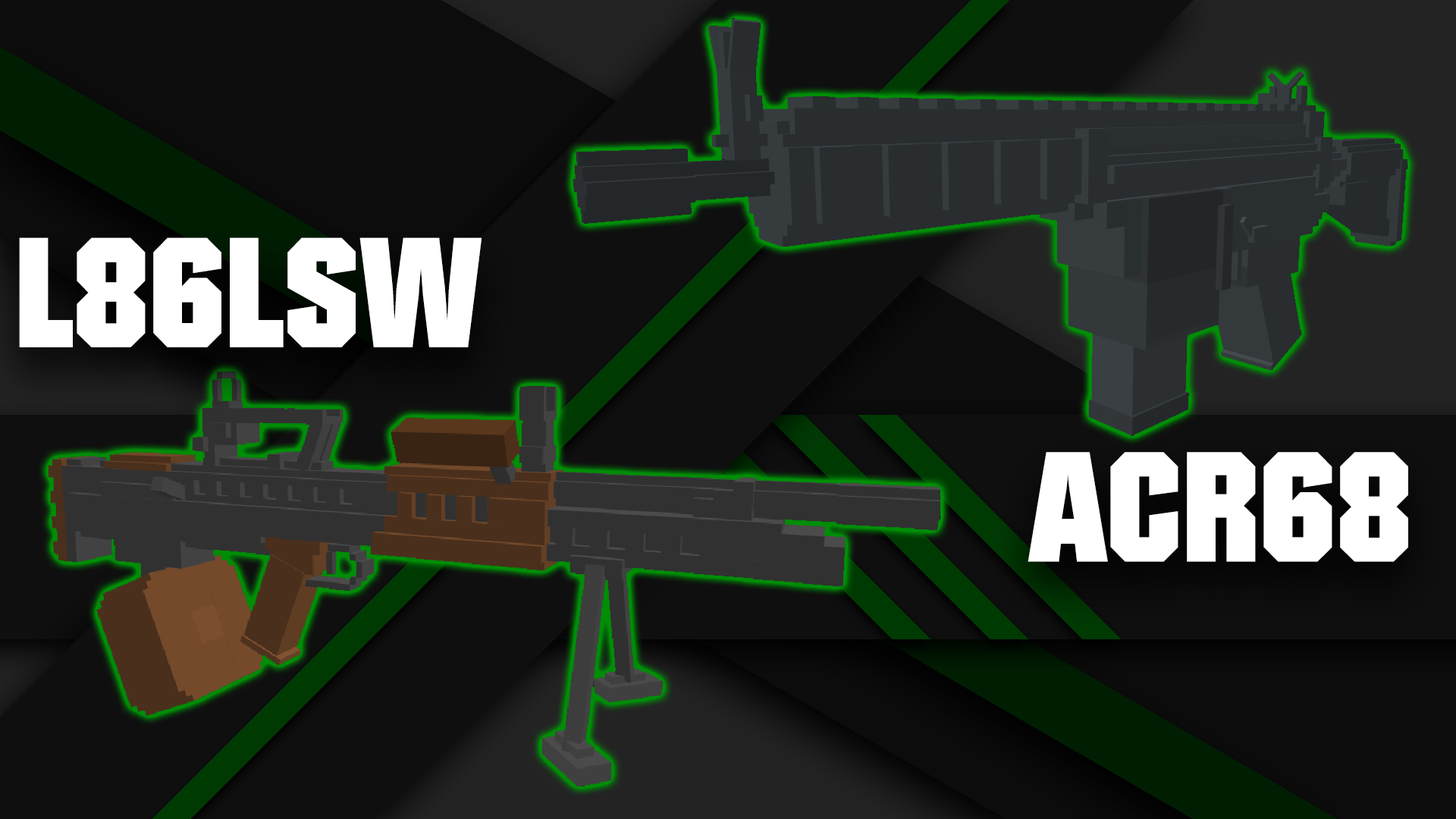
<style>
.page{position:relative;width:1456px;height:819px}
.page>*{position:absolute;margin:0}
.t1{font:151.7px "Autumn";color:#ffffff}
</style>
<div class="page">
<p class="t1" style="left:19px;top:237px;width:463px;height:110px">L86LSW</p>
<p class="t1" style="left:1028px;top:452px;width:380px;height:110px">ACR68</p>
</div>
